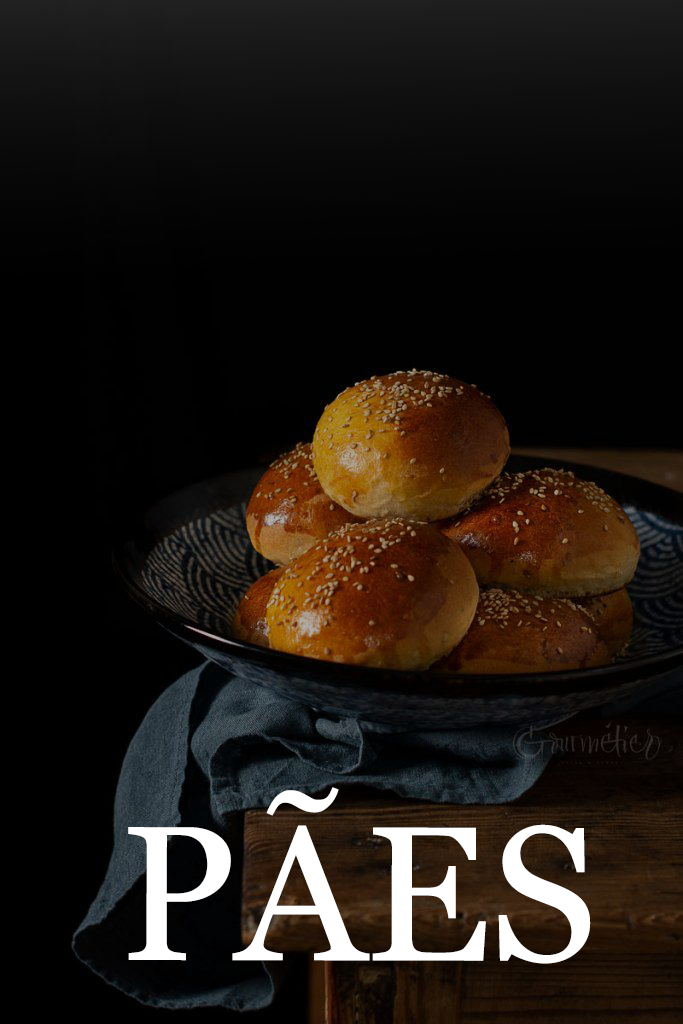
<style>
.page{position:relative;width:683px;height:1024px}
.page>*{position:absolute;margin:0}
.t1{font:191.5px "Georgia";color:#ffffff}
</style>
<div class="page">
<p class="t1" style="left:128px;top:787px;width:463px;height:177px">PÃES</p>
</div>
